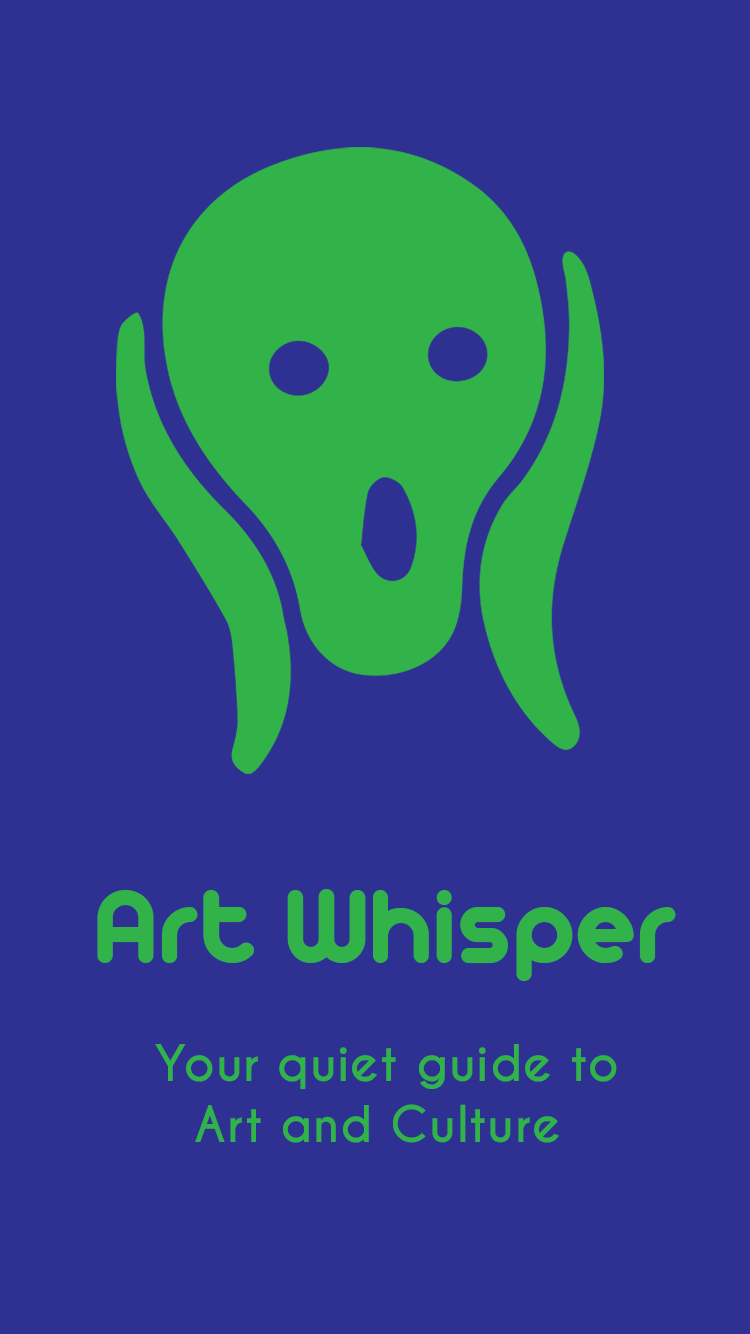
<style>
.page{position:relative;width:750px;height:1334px;background:#2f3192}
.page>*{position:absolute;margin:0}
.t1{font:115.1px "Arista2.0";letter-spacing:0.015em;color:#32b34a}
.t2{font:47.4px/61px "CaviarDreams-Bold";letter-spacing:0.015em;color:#32b34a}
</style>
<div class="page">
<p class="t1" style="left:97px;top:889px;width:579px;height:92px">Art Whisper</p>
<p class="t2" style="left:155px;top:1044px;width:462px;height:99px;text-align:center">Your quiet guide to<br> Art and Culture</p>
</div>
